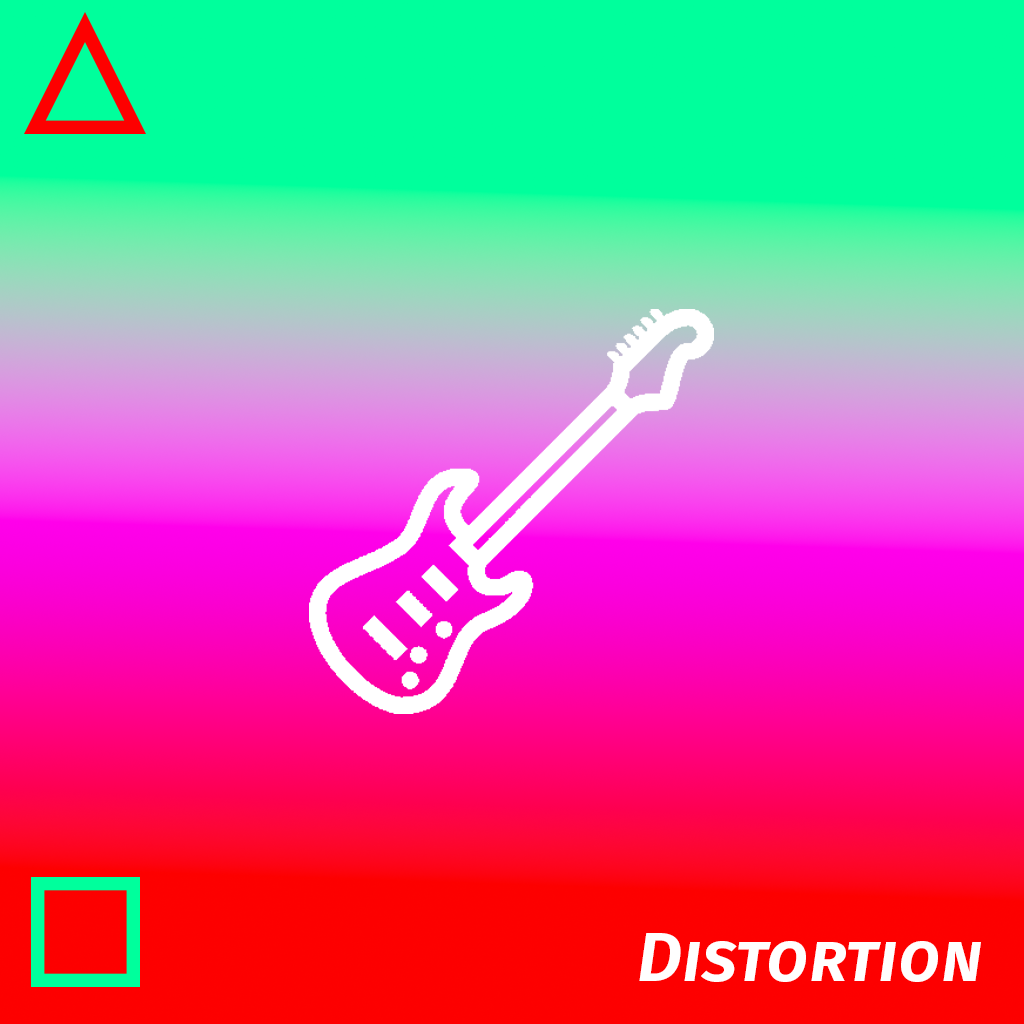
<style>
.page{position:relative;width:1024px;height:1024px}
.page>*{position:absolute;margin:0}
.t1{font:70px "FiraSans-SemiBoldItalic";color:#fffefe;font-variant:small-caps}
</style>
<div class="page">
<p class="t1" style="left:639px;top:933px;width:342px;height:49px">Distortion</p>
</div>
